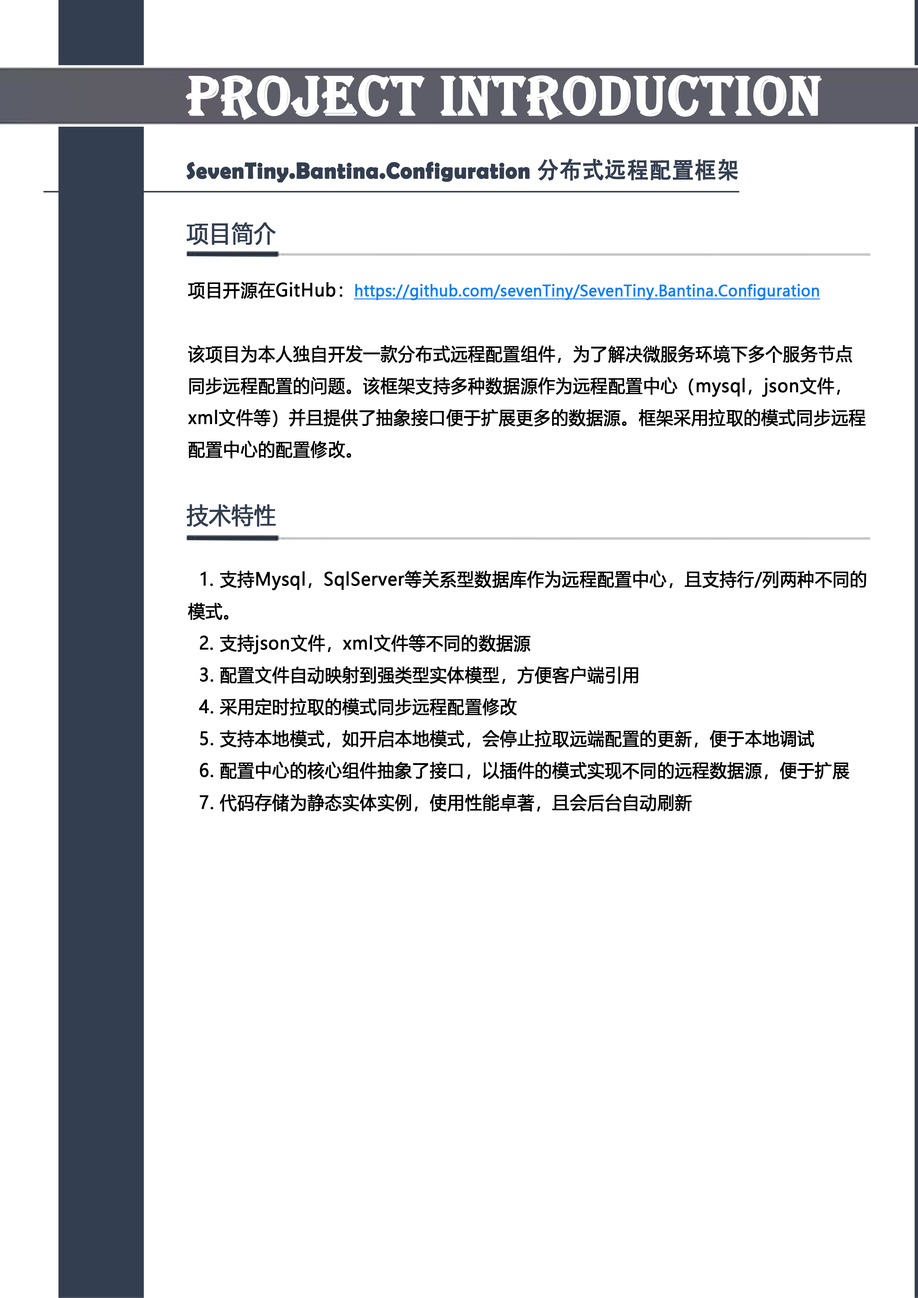
<style>
.page{position:relative;width:918px;height:1298px;background:#ffffff}
.page>*{position:absolute;margin:0}
.t1{font:57.4px "Algerian";letter-spacing:0.005em;color:#ffffff;font-weight:bold;scale:0.95 1}
.t2{font:23px "BerlinSansFBDemi-Bold";letter-spacing:0.005em;color:#333e50;font-weight:bold;scale:0.95 1}
.t3{font:23px "AdobeHeitiStd-Regular";letter-spacing:0.005em;color:#333e50;font-weight:bold;scale:0.95 1}
.t4{font:23px "MicrosoftYaHei";letter-spacing:0.005em;color:#333e50;font-weight:bold;scale:0.95 1}
.t5{font:17.9px/31.9px "MicrosoftYaHei";letter-spacing:0.005em;color:#000000;font-weight:bold;scale:0.95 1}
.t6{font:15.3px/28.1px "MicrosoftYaHei";letter-spacing:0.005em;color:#087ff9;font-weight:bold;text-decoration:underline;scale:0.95 1}
</style>
<div class="page">
<p class="t1" style="left:185px;top:75px;width:637px;height:45px">PROJECT INTRODUCTION</p>
<p class="t2" style="left:186px;top:159px;width:552px;height:24px">SevenTiny.Bantina.Configuration <span class="t3">分布式远程配置框架</span></p>
<p class="t4" style="left:186px;top:223px;width:90px;height:22px">项目简介</p>
<p class="t5" style="left:188px;top:282px;width:678px;height:177px">项目开源在GitHub：<span class="t6">https://github.com/sevenTiny/SevenTiny.Bantina.Configuration<br></span><br>该项目为本人独自开发一款分布式远程配置组件，为了解决微服务环境下多个服务节点同步远程配置的问题。该框架支持多种数据源作为远程配置中心（mysql，json文件，xml文件等）并且提供了抽象接口便于扩展更多的数据源。框架采用拉取的模式同步远程配置中心的配置修改。</p>
<p class="t4" style="left:186px;top:504px;width:90px;height:23px">技术特性</p>
<p class="t5" style="left:188px;top:571px;width:679px;height:241px">1. 支持Mysql，SqlServer等关系型数据库作为远程配置中心，且支持行/列两种不同的模式。<br> 2. 支持json文件，xml文件等不同的数据源<br>  3. 配置文件自动映射到强类型实体模型，方便客户端引用<br>  4. 采用定时拉取的模式同步远程配置修改<br>  5. 支持本地模式，如开启本地模式，会停止拉取远端配置的更新，便于本地调试<br>  6. 配置中心的核心组件抽象了接口，以插件的模式实现不同的远程数据源，便于扩展<br>  7. 代码存储为静态实体实例，使用性能卓著，且会后台自动刷新</p>
</div>
